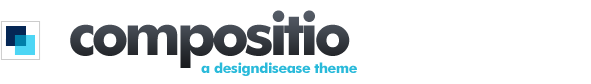
<style>
.page{position:relative;width:591px;height:84px;background:#ffffff}
.page>*{position:absolute;margin:0}
.t1{font:60px "FuturaBT-Bold";letter-spacing:-0.075em;color:#373c43}
.t2{font:14px "FuturaBT-Bold";letter-spacing:-0.025em;color:#2abada}
</style>
<div class="page">
<p class="t1" style="left:70px;top:10px;width:280px;height:58px">compositio</p>
<p class="t2" style="left:201px;top:62px;width:156px;height:14px">a designdisease theme</p>
</div>
